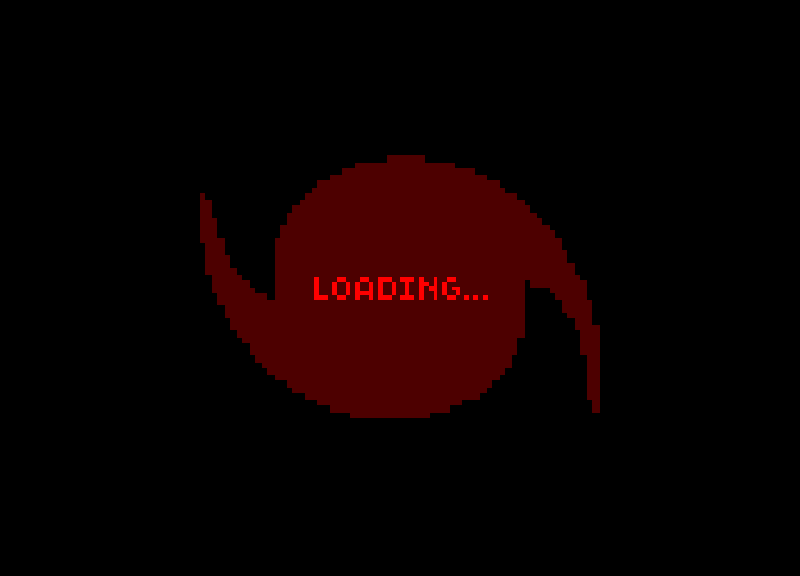
<style>
.page{position:relative;width:800px;height:576px;background:#000000}
.page>*{position:absolute;margin:0}
.t1{font:36.5px "04b03";color:#ff0000}
</style>
<div class="page">
<p class="t1" style="left:314px;top:277px;width:174px;height:23px">LOADING...</p>
</div>
